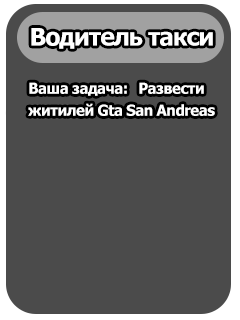
<style>
.page{position:relative;width:240px;height:320px;background:#4b4b4b}
.page>*{position:absolute;margin:0}
.t1{font:24px "Tahoma-Bold";letter-spacing:-0.035em;color:#ffffff}
.t2{font:15px "Tahoma-Bold";letter-spacing:-0.035em;color:#ffffff}
</style>
<div class="page">
<p class="t1" style="left:31px;top:28px;width:182px;height:21px">Водитель такси</p>
<p class="t2" style="left:29px;top:82px;width:98px;height:14px">Ваша задача:</p>
<p class="t2" style="left:139px;top:82px;width:65px;height:12px">Развести</p>
<p class="t2" style="left:28px;top:103px;width:187px;height:13px">житилей Gta San Andreas</p>
</div>
